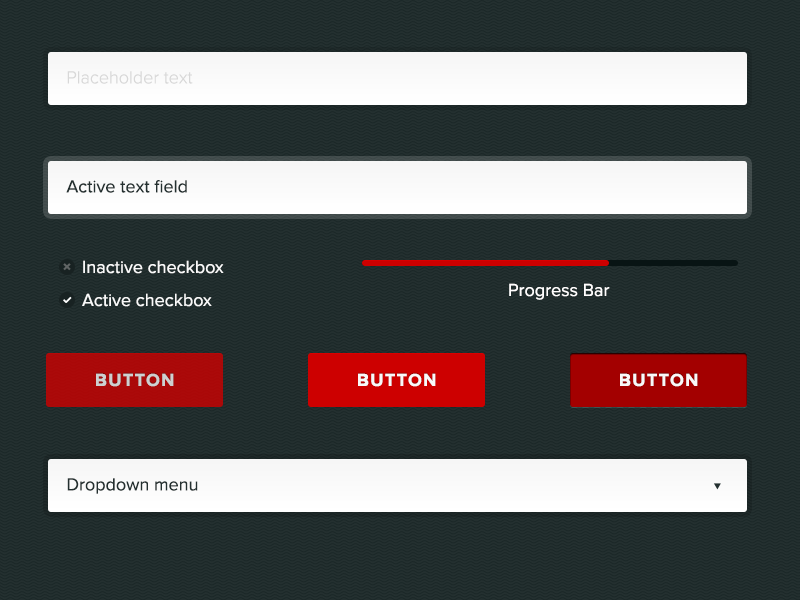
<style>
.page{position:relative;width:800px;height:600px}
.page>*{position:absolute;margin:0}
.t1{font:18px "ProximaNova-Light";color:#d8d8d8}
.t2{font:18px "ProximaNova-Regular";color:#243030}
.t3{font:18px "ProximaNova-Regular";color:#f9f9f9}
.t4{font:18px "ProximaNova-Regular";color:#fffefe}
.t5{font:18px "ProximaNova-Bold";letter-spacing:0.075em;color:#ced0d0;text-transform:uppercase}
.t6{font:18px "ProximaNova-Bold";letter-spacing:0.075em;color:#f9f9f9;text-transform:uppercase}
</style>
<div class="page">
<p class="t1" style="left:67px;top:71px;width:126px;height:13px">Placeholder text</p>
<p class="t2" style="left:66px;top:180px;width:121px;height:13px">Active text field</p>
<p class="t3" style="left:83px;top:260px;width:141px;height:14px">Inactive checkbox</p>
<p class="t3" style="left:82px;top:293px;width:130px;height:14px">Active checkbox</p>
<p class="t4" style="left:509px;top:283px;width:101px;height:17px">Progress Bar</p>
<p class="t5" style="left:96px;top:373px;width:78px;height:14px">Button</p>
<p class="t6" style="left:358px;top:373px;width:78px;height:14px">Button</p>
<p class="t6" style="left:620px;top:373px;width:78px;height:14px">Button</p>
<p class="t2" style="left:67px;top:478px;width:131px;height:16px">Dropdown menu</p>
</div>
